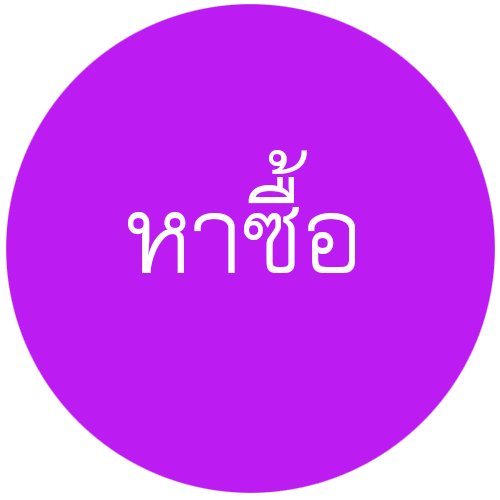
<style>
.page{position:relative;width:500px;height:500px;background:#bc1cf1}
.page>*{position:absolute;margin:0}
.t1{font:151.4px "DSNPreeCha";color:#ffffff}
</style>
<div class="page">
<p class="t1" style="left:128px;top:150px;width:227px;height:123px">หาซื้อ</p>
</div>
